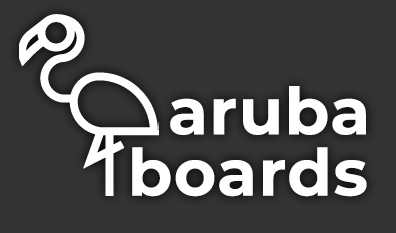
<style>
.page{position:relative;width:396px;height:233px;background:#333333}
.page>*{position:absolute;margin:0}
.t1{font:65px "Montserrat-Bold";letter-spacing:0.02em;color:#ffffff}
</style>
<div class="page">
<p class="t1" style="left:170px;top:86px;width:196px;height:49px">aruba</p>
<p class="t1" style="left:132px;top:147px;width:235px;height:50px">boards</p>
</div>
